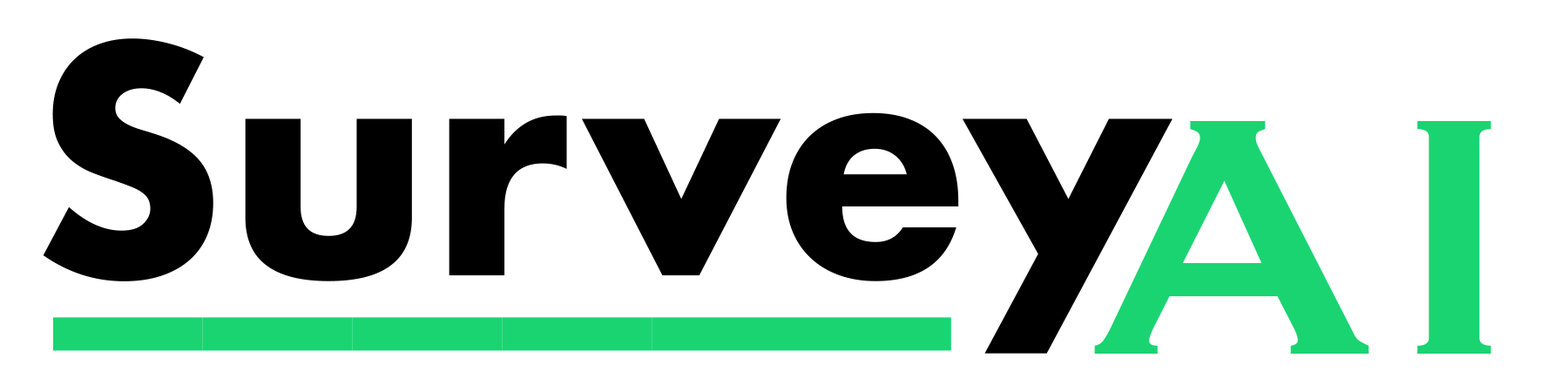
<style>
.page{position:relative;width:1568px;height:392px;background:#ffffff}
.page>*{position:absolute;margin:0}
.t1{font:304.9px "Futura-Bold";color:#000000}
.t2{font:442.8px "Copperplate";color:#1ad472}
.t3{font:265px "Futura-Bold";color:#1ad472}
</style>
<div class="page">
<p class="t1" style="left:43px;top:38px;width:1130px;height:316px">Survey</p>
<p class="t2" style="left:1094px;top:121px;width:397px;height:233px">AI</p>
<p class="t3" style="left:53px;top:317px;width:898px;height:34px">______</p>
</div>
